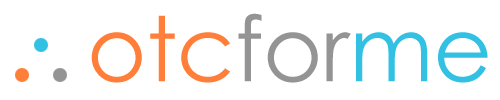
<style>
.page{position:relative;width:500px;height:100px;background:#ffffff}
.page>*{position:absolute;margin:0}
.t1{font:90px "CenturyGothic";color:#ff7e39}
.t2{font:90px "CenturyGothic";color:#949494}
.t3{font:90px "CenturyGothic";color:#33c1e3}
</style>
<div class="page">
<p class="t1" style="left:91px;top:13px;width:397px;height:70px">otc<span class="t2">for</span><span class="t3">me</span></p>
</div>
